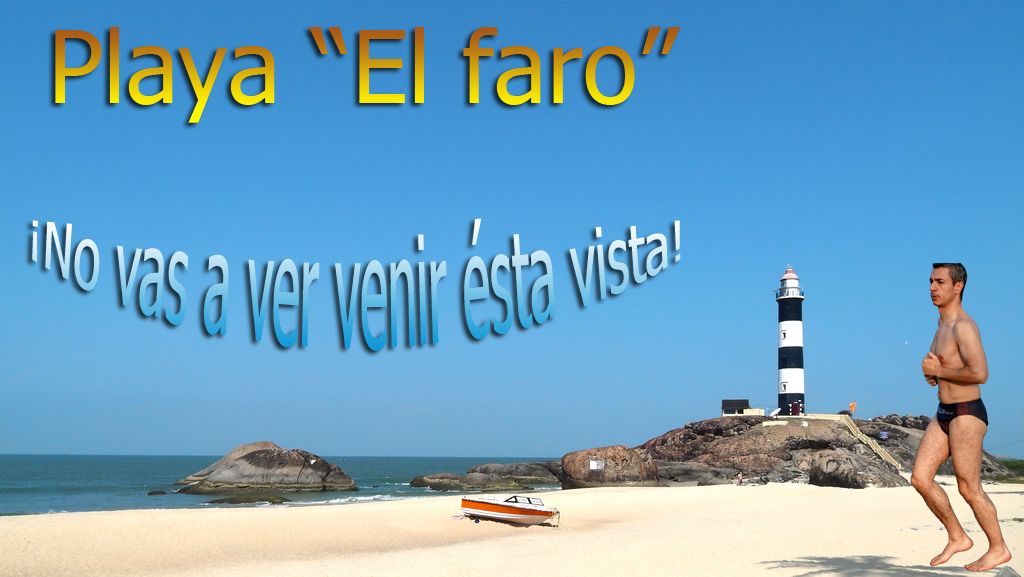
<style>
.page{position:relative;width:1024px;height:577px}
.page>*{position:absolute;margin:0}
.t1{font:100px "Tahoma"}
.t2{font:50px "Tahoma"}
</style>
<div class="page">
<p class="t1" style="left:55px;top:27px;width:626px;height:96px">Playa “El faro”</p>
<p class="t2" style="left:32px;top:218px;width:649px;height:133px">¡No vas a ver venir ésta vista!</p>
</div>
